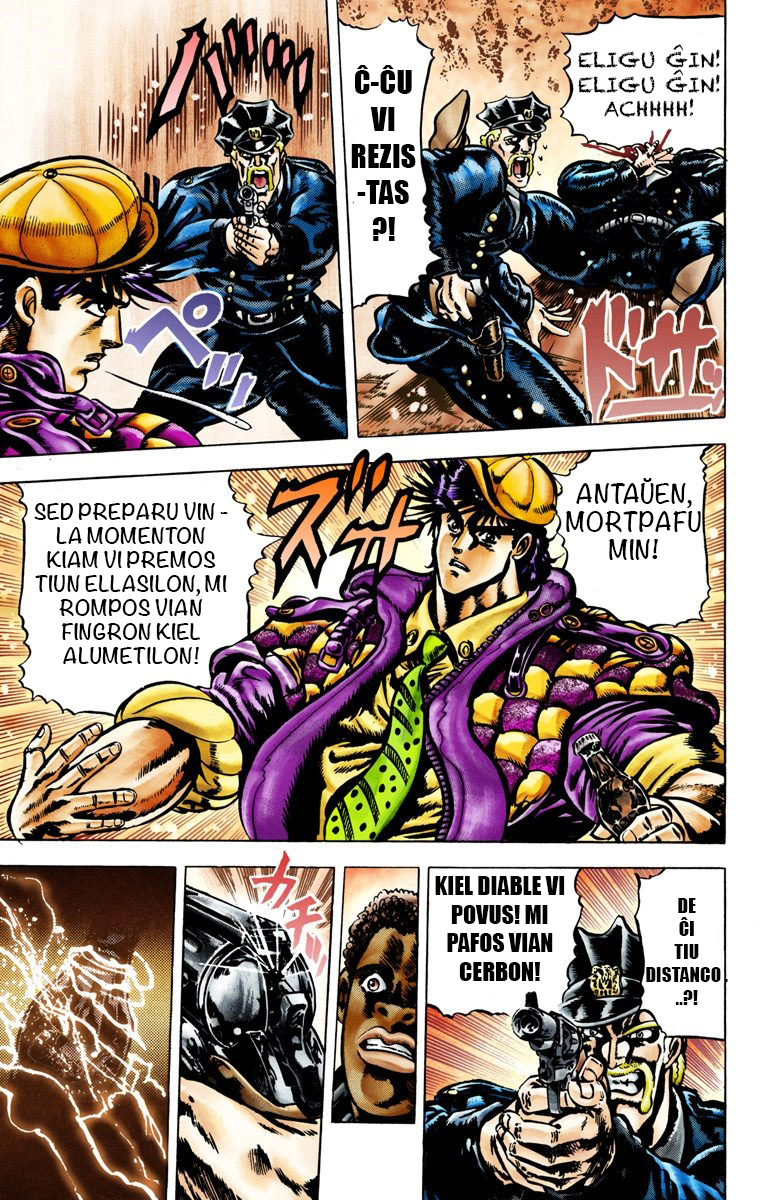
<style>
.page{position:relative;width:780px;height:1200px;background:#ffffff}
.page>*{position:absolute;margin:0}
.t1{font:20.5px "Chalkduster";color:#000000}
.t2{font:30.5px "Impact";color:#000000}
.t3{font:23.5px "Noteworthy-Bold";color:#000000}
.t4{font:20px "Noteworthy-Bold";color:#000000}
.t5{font:23.8px "Impact";color:#000000}
.t6{font:19.3px "Impact";color:#000000}
</style>
<div class="page">
<p class="t1" style="left:578px;top:44px;width:142px;height:74px;text-align:center">ELIGU ĜIN!<br>ELIGU ĜIN!<br>ACHHHH!</p>
<p class="t2" style="left:351px;top:65px;width:65px;height:176px;text-align:center">Ĉ-ĈU VI REZIS-TAS ?!</p>
<p class="t3" style="left:566px;top:478px;width:135px;height:82px;text-align:center">ANTAŬEN, MORTPAFU MIN!</p>
<p class="t4" style="left:34px;top:502px;width:194px;height:162px;text-align:center">SED PREPARU VIN - LA MOMENTON KIAM VI PREMOS TIUN ELLASILON, MI ROMPOS VIAN FINGRON KIEL ALUMETILON!</p>
<p class="t5" style="left:435px;top:876px;width:130px;height:105px;text-align:center">KIEL DIABLE VI POVUS! MI PAFOS VIAN CERBON!</p>
<p class="t6" style="left:646px;top:898px;width:82px;height:107px;text-align:center">DE <br>ĈI <br>TIU <br>DISTANCO .<br>..?!</p>
</div>
